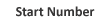
<style>
.page{position:relative;width:107px;height:23px;background:#ffffff}
.page>*{position:absolute;margin:0}
.t1{font:14px "Calibri-Bold";color:#363535}
</style>
<div class="page">
<p class="t1" style="left:16px;top:6px;width:79px;height:11px">Start Number</p>
</div>
